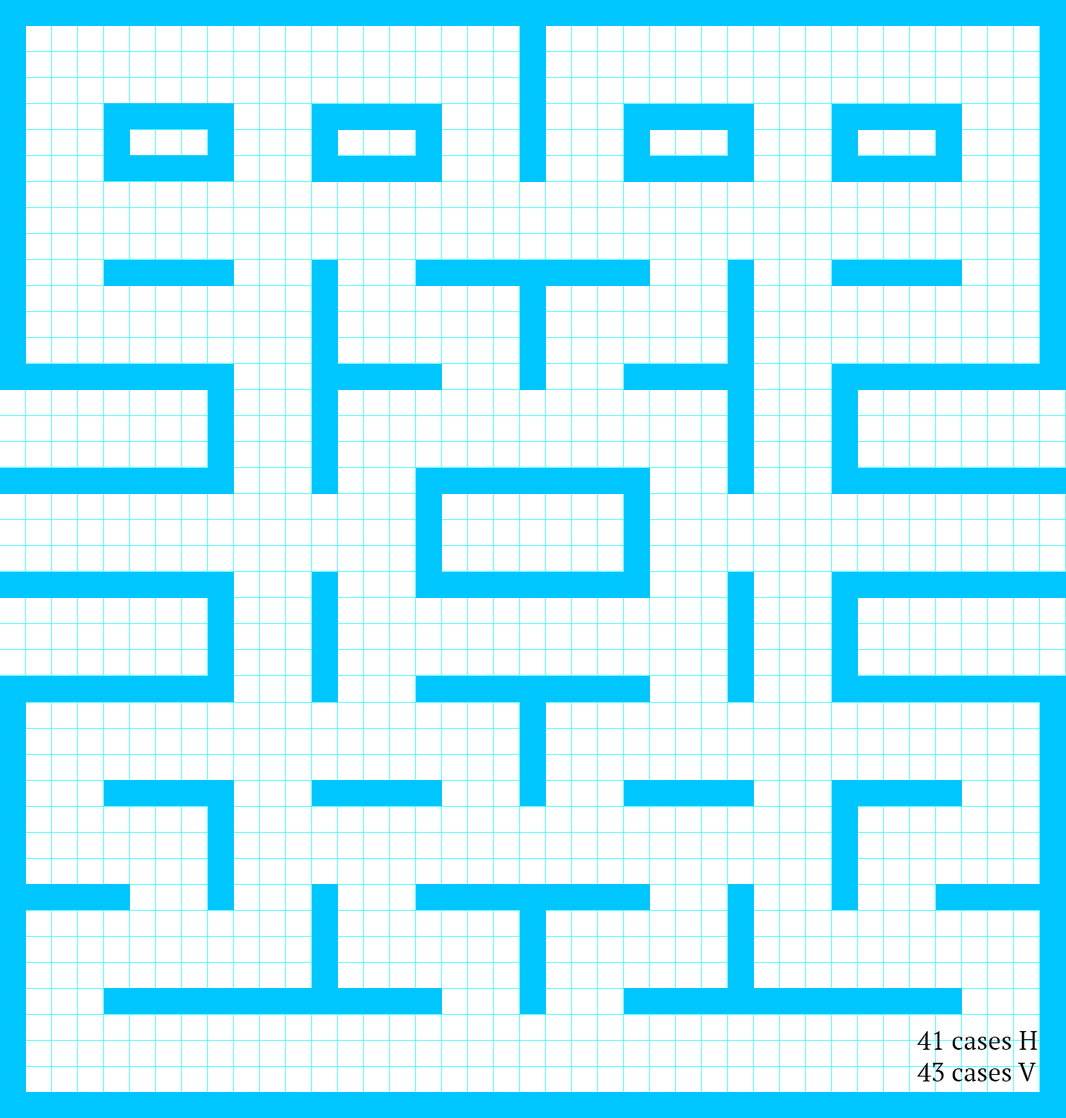
<style>
.page{position:relative;width:1066px;height:1118px;background:#ffffff}
.page>*{position:absolute;margin:0}
.t1{font:26px "PTSerif-Regular";color:#000000}
</style>
<div class="page">
<p class="t1" style="left:918px;top:1031px;width:120px;height:51px">41 cases H<br>43 cases V</p>
</div>
